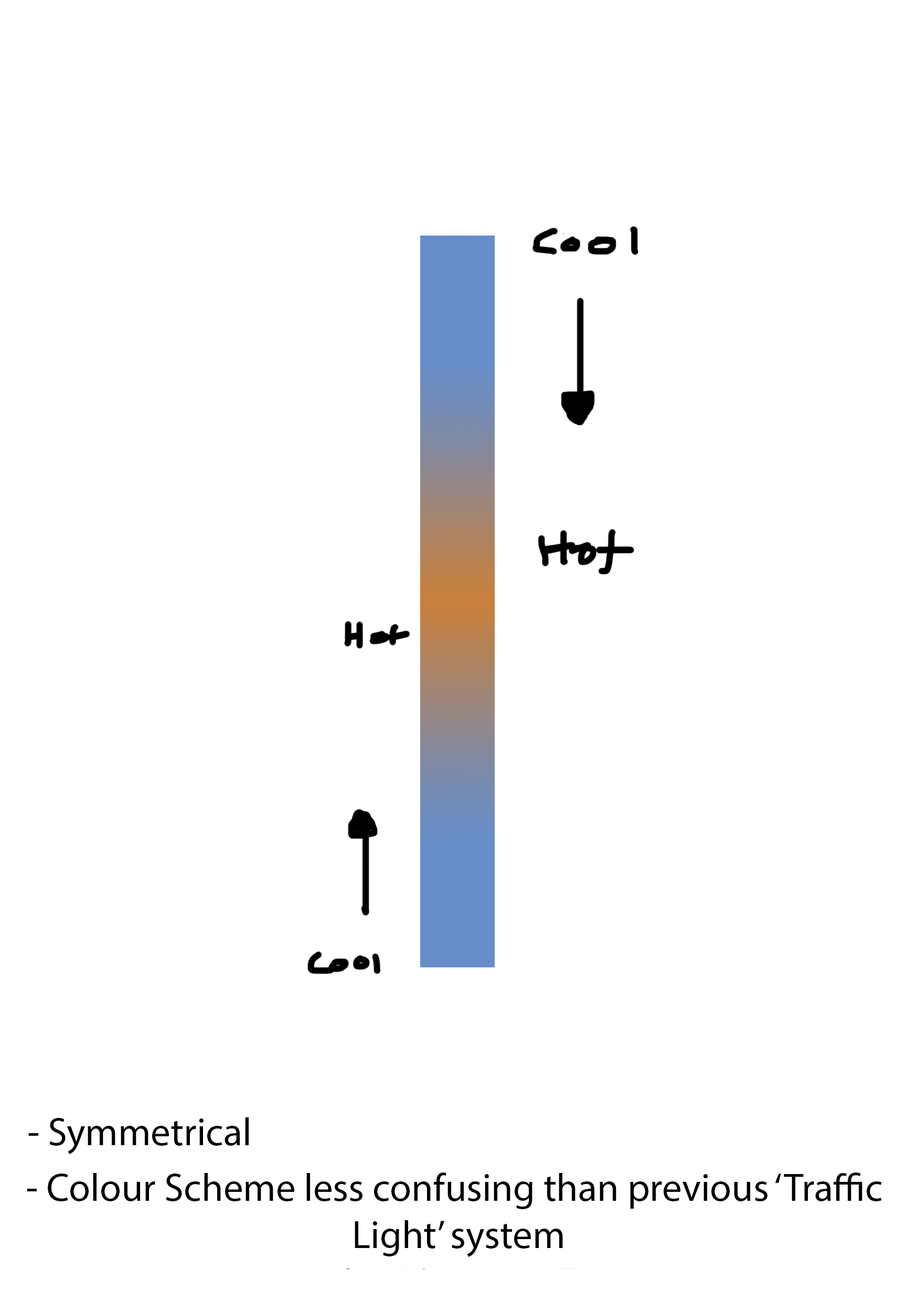
<style>
.page{position:relative;width:917px;height:1301px;background:#ffffff}
.page>*{position:absolute;margin:0}
.t1{font:39.3px "MyriadPro-Regular";color:#000000}
</style>
<div class="page">
<p class="t1" style="left:28px;top:1117px;width:221px;height:37px">- Symmetrical</p>
<p class="t1" style="left:27px;top:1172px;width:855px;height:85px;text-align:center">- Colour Scheme less confusing than previous ‘Traffic <br>Light’ system</p>
</div>
